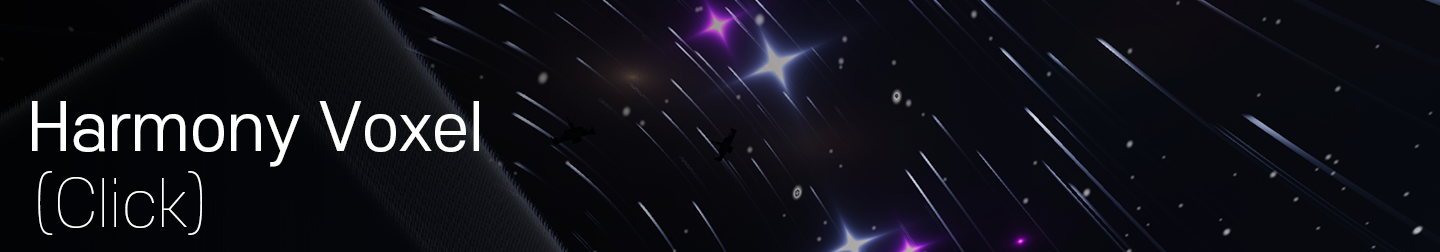
<style>
.page{position:relative;width:1440px;height:252px}
.page>*{position:absolute;margin:0}
.t1{font:64px "S-CoreDream-4Regular";color:#ffffff}
.t2{font:64px "S-CoreDream-1Thin";color:#ffffff}
</style>
<div class="page">
<p class="t1" style="left:32px;top:101px;width:447px;height:66px">Harmony Voxel</p>
<p class="t2" style="left:38px;top:171px;width:164px;height:64px">(Click)</p>
</div>
